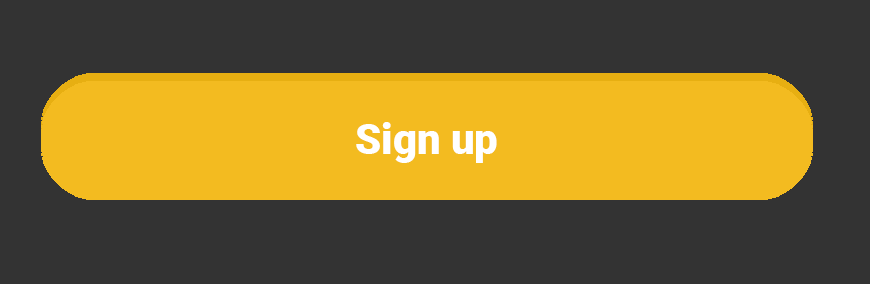
<style>
.page{position:relative;width:870px;height:284px;background:#333333}
.page>*{position:absolute;margin:0}
.t1{font:41.7px "Roboto-Black";color:#ffffff}
</style>
<div class="page">
<p class="t1" style="left:356px;top:122px;width:141px;height:41px">Sign up</p>
</div>
